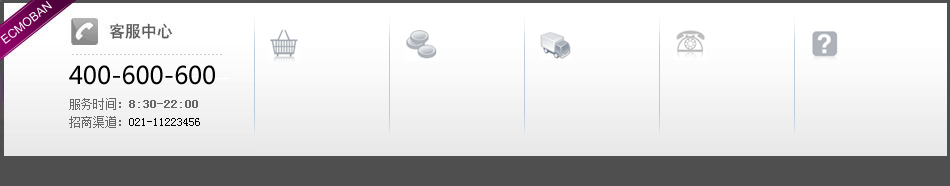
<style>
.page{position:relative;width:950px;height:186px;background:#ffffff}
.page>*{position:absolute;margin:0}
.t1{font:24px "MicrosoftYaHei";color:#000000}
.t2{font:12px/18px "SimSun";color:#000000}
.t3{font:12px/18px "SimSun";color:#666666}
.t4{font:12px/18px "SimSun";color:#666666;font-weight:bold}
</style>
<div class="page">
<p class="t1" style="left:69px;top:65px;width:146px;height:20px">400-600-600</p>
<p class="t2" style="left:69px;top:98px;width:131px;height:30px"><span class="t3">服务时间：</span><span class="t4">8:30-22:00<br></span><span class="t3">招商渠道：</span>021-11223456</p>
</div>
